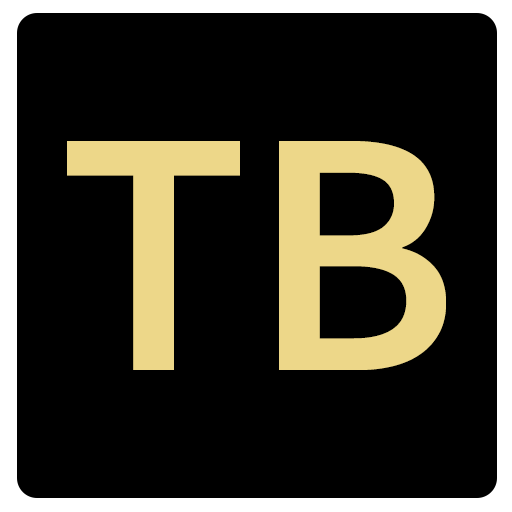
<style>
.page{position:relative;width:512px;height:512px;background:#000000}
.page>*{position:absolute;margin:0}
.t1{font:350px "SourceSansPro-SemiBold";color:#edd789}
</style>
<div class="page">
<p class="t1" style="left:67px;top:141px;width:379px;height:229px">TB</p>
</div>
